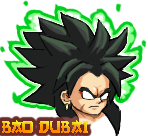
<style>
.page{position:relative;width:148px;height:136px;background:#ffffff}
.page>*{position:absolute;margin:0}
.t1{font:18px "SVN-GangofThree"}
</style>
<div class="page">
<p class="t1" style="left:2px;top:120px;width:86px;height:13px">BAO DUBAI</p>
</div>
